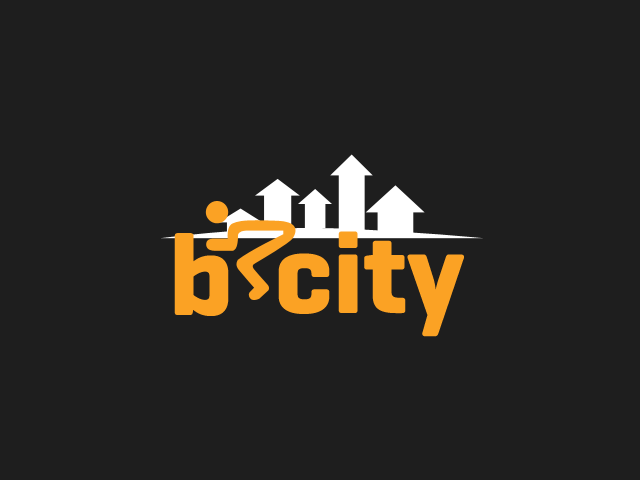
<style>
.page{position:relative;width:640px;height:480px;background:#1e1e1e}
.page>*{position:absolute;margin:0}
.t1{font:116.8px "Geogrotesque-Bold";color:#fba224}
</style>
<div class="page">
<p class="t1" style="left:174px;top:233px;width:55px;height:83px">b</p>
<p class="t1" style="left:278px;top:231px;width:186px;height:106px">city</p>
</div>
